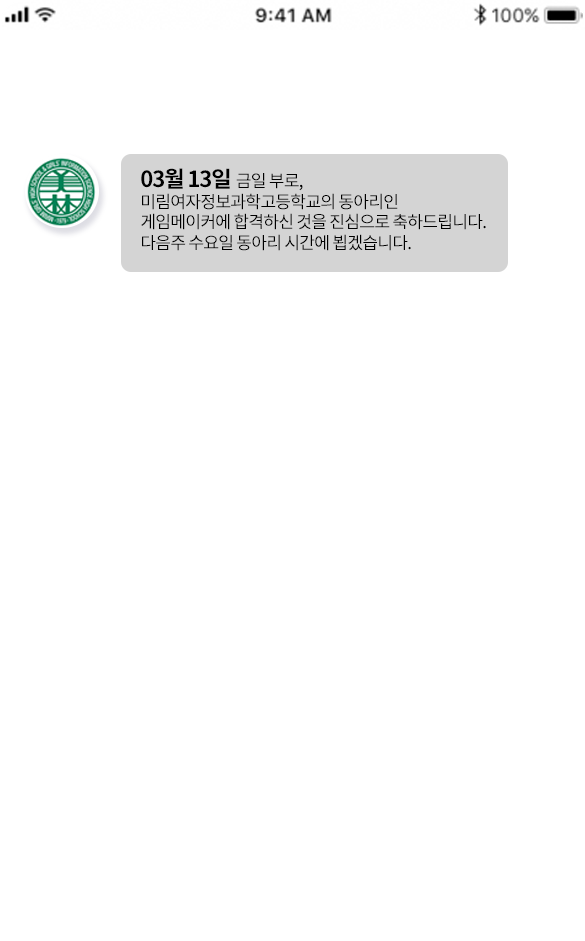
<style>
.page{position:relative;width:585px;height:941px;background:#ffffff}
.page>*{position:absolute;margin:0}
.t1{font:17.2px "NotoSansCJKkr-Regular";letter-spacing:-0.05em;color:#000000}
.t2{font:22.1px "NotoSansCJKkr-Bold";letter-spacing:-0.05em;color:#000000}
</style>
<div class="page">
<p class="t1" style="left:141px;top:168px;width:345px;height:83px"><span class="t2">03월 13일 </span>금일 부로,<br>미림여자정보과학고등학교의 동아리인<br>게임메이커에 합격하신 것을 진심으로 축하드립니다.<br>다음주 수요일 동아리 시간에 뵙겠습니다.</p>
</div>
